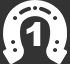
<style>
.page{position:relative;width:70px;height:64px;background:#333333}
.page>*{position:absolute;margin:0}
.t1{font:33.3px "Arial-Black";color:#ffffff}
</style>
<div class="page">
<p class="t1" style="left:26px;top:22px;width:15px;height:24px">1</p>
</div>
